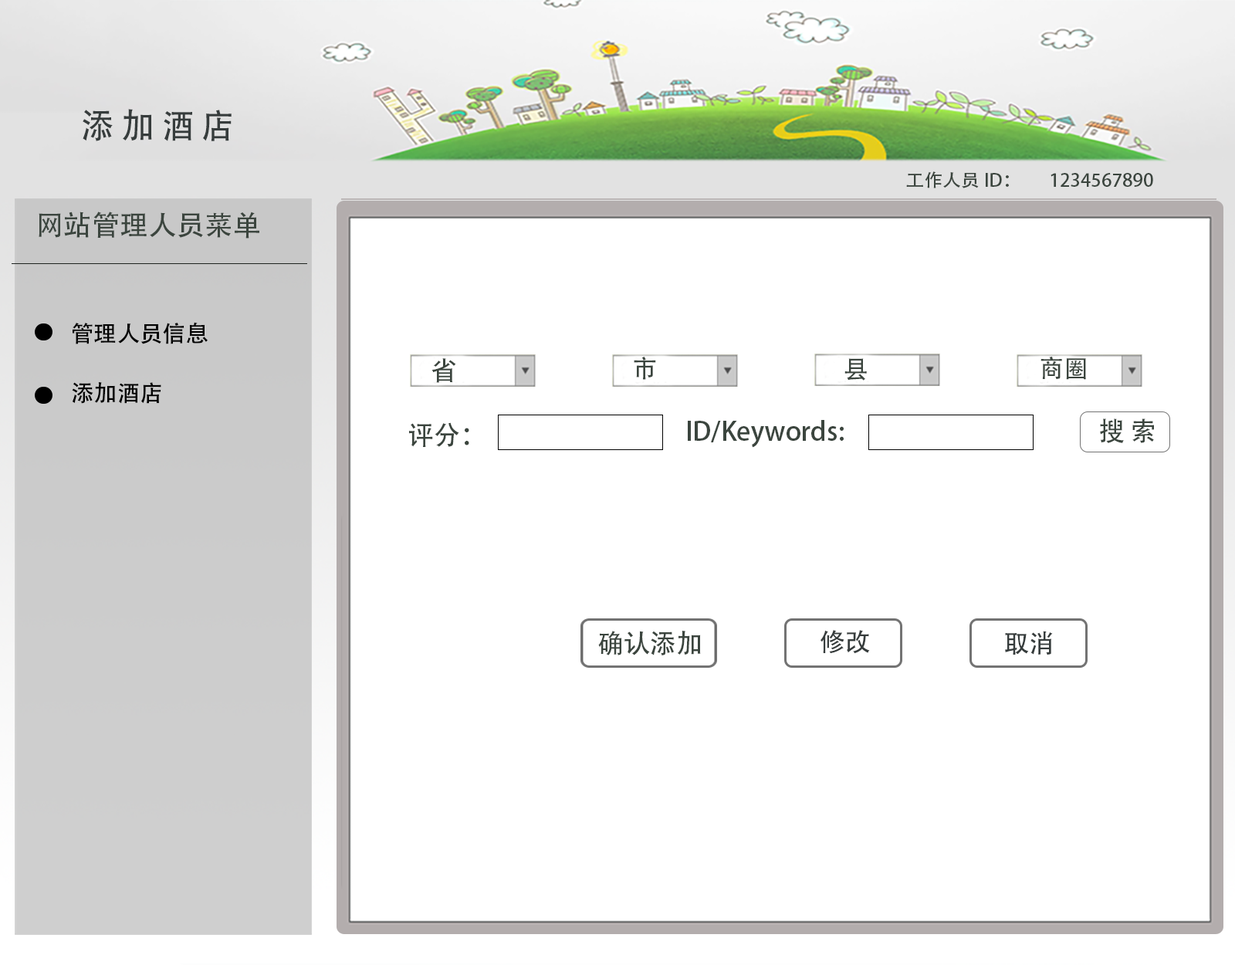
<style>
.page{position:relative;width:1235px;height:965px;background:#ffffff}
.page>*{position:absolute;margin:0}
.t1{font:34.3px "AdobeHeitiStd-Regular";letter-spacing:-0.005em;color:#363c3c;text-transform:uppercase;scale:0.96 1}
.t2{font:17.8px "AdobeHeitiStd-Regular";color:#3b453e;scale:1.04 1}
.t3{font:28.1px "AdobeHeitiStd-Regular";color:#3b453e}
.t4{font:22.8px "AdobeHeitiStd-Regular";color:#010101}
.t5{font:22.8px "AdobeHeitiStd-Regular";color:#000000}
.t6{font:26.3px "AdobeHeitiStd-Regular";color:#3b453e}
</style>
<div class="page">
<p class="t1" style="left:83px;top:109px;width:149px;height:32px">添 加 酒 店</p>
<p class="t2" style="left:907px;top:171px;width:247px;height:17px">工作人员ID：        1234567890</p>
<p class="t3" style="left:39px;top:212px;width:220px;height:27px">网站管理人员菜单</p>
<p class="t4" style="left:73px;top:322px;width:135px;height:22px">管理人员信息</p>
<p class="t5" style="left:72px;top:382px;width:89px;height:22px">添加酒店</p>
<p class="t6" style="left:409px;top:422px;width:60px;height:25px">评分：</p>
<p class="t6" style="left:688px;top:420px;width:156px;height:28px">ID/Keywords:</p>
</div>
